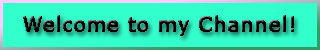
<style>
.page{position:relative;width:320px;height:50px;background:#33ffcc}
.page>*{position:absolute;margin:0}
.t1{font:20px "Verdana";color:#000000;font-weight:bold}
</style>
<div class="page">
<p class="t1" style="left:23px;top:15px;width:271px;height:21px">Welcome to my Channel!</p>
</div>
